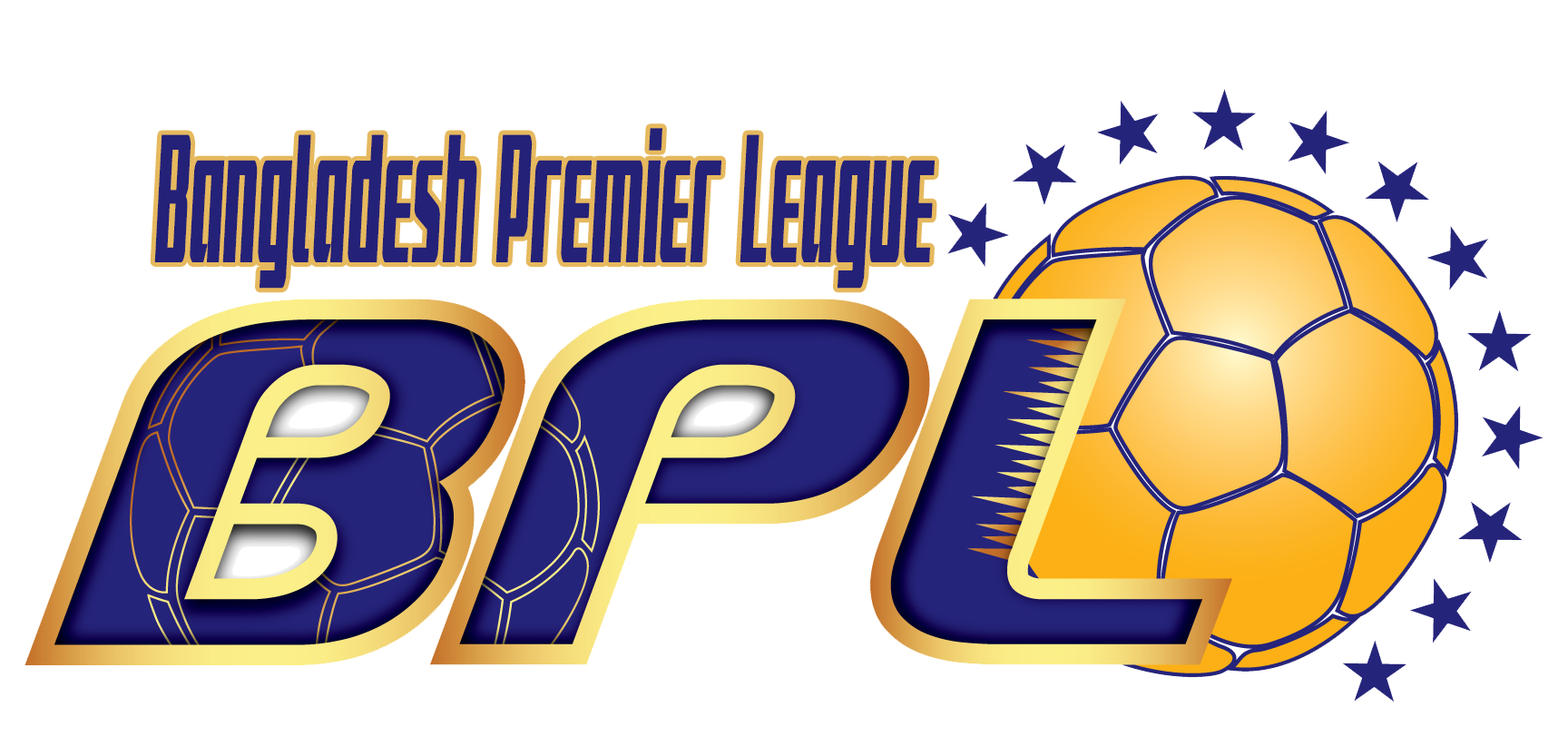
<style>
.page{position:relative;width:1568px;height:746px;background:#ffffff}
.page>*{position:absolute;margin:0}
.t1{font:244.8px "SubadaiBaanExpandedItalic";color:#242178;scale:0.25 1}
</style>
<div class="page">
<p class="t1" style="left:154px;top:128px;width:781px;height:161px">Bangladesh Premier League</p>
</div>
